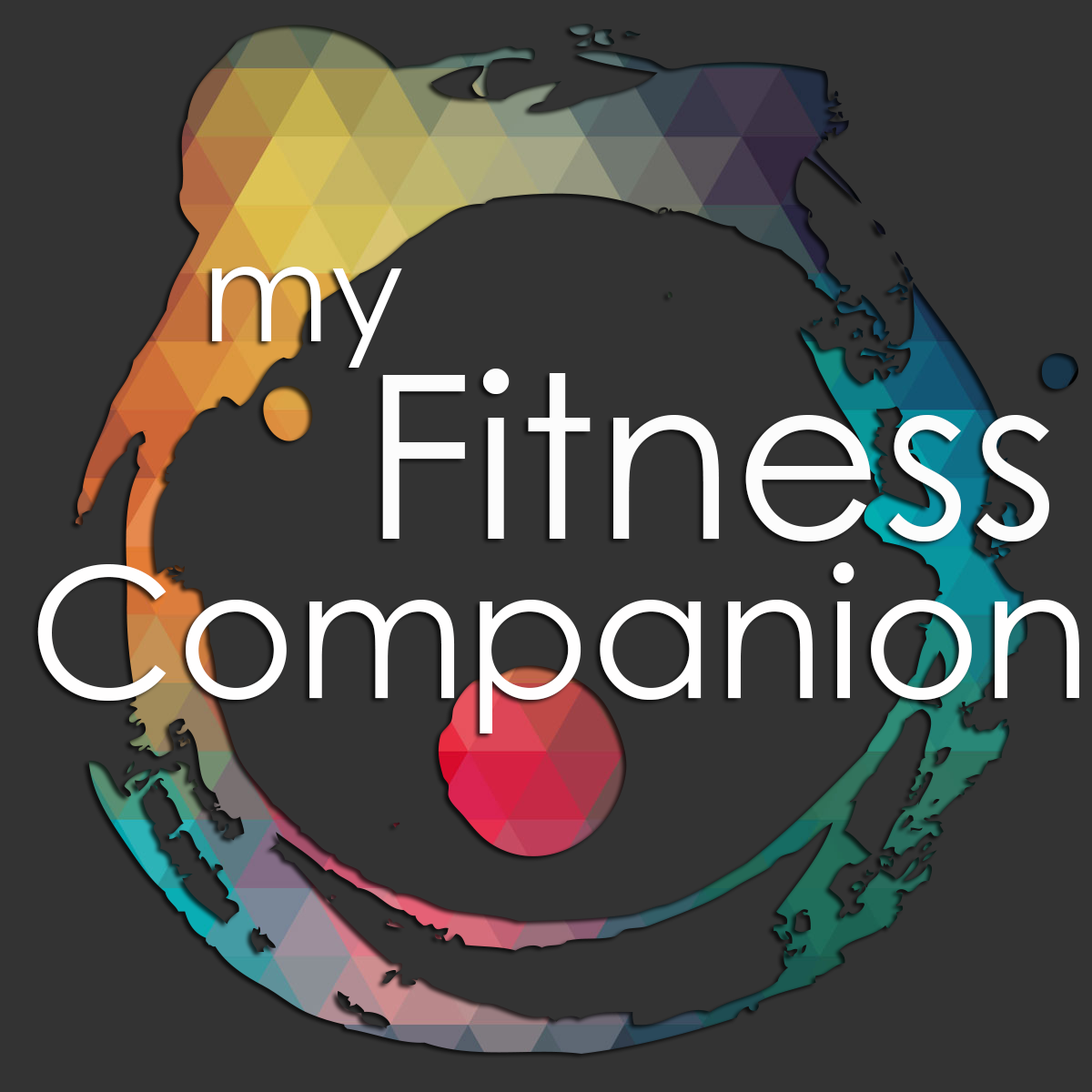
<style>
.page{position:relative;width:1092px;height:1092px;background:#333333}
.page>*{position:absolute;margin:0}
.t1{font:136.5px "CenturyGothic";color:#ffffff}
.t2{font:227.5px "CenturyGothic";color:#fcfcfc}
.t3{font:182px "CenturyGothic";color:#fffefe}
</style>
<div class="page">
<p class="t1" style="left:212px;top:267px;width:190px;height:101px">my</p>
<p class="t2" style="left:382px;top:369px;width:667px;height:172px">Fitness</p>
<p class="t3" style="left:37px;top:562px;width:1042px;height:171px">Companion</p>
</div>
